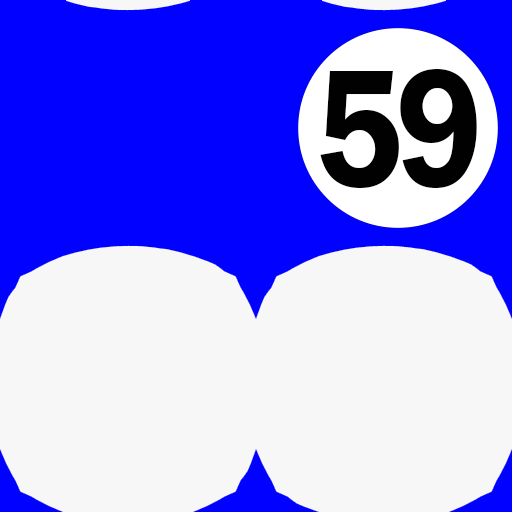
<style>
.page{position:relative;width:512px;height:512px;background:#f7f7f7}
.page>*{position:absolute;margin:0}
.t1{font:172.5px "FranklinGothic-Demi";letter-spacing:-0.05em;color:#010101;scale:0.87 1}
</style>
<div class="page">
<p class="t1" style="left:320px;top:69px;width:157px;height:119px">59</p>
</div>
